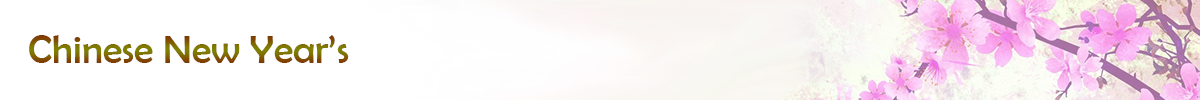
<style>
.page{position:relative;width:1200px;height:100px;background:#ffffff}
.page>*{position:absolute;margin:0}
.t1{font:40px "BerlinSansFB-Reg"}
</style>
<div class="page">
<p class="t1" style="left:29px;top:35px;width:320px;height:28px">Chinese New Year’s</p>
</div>
